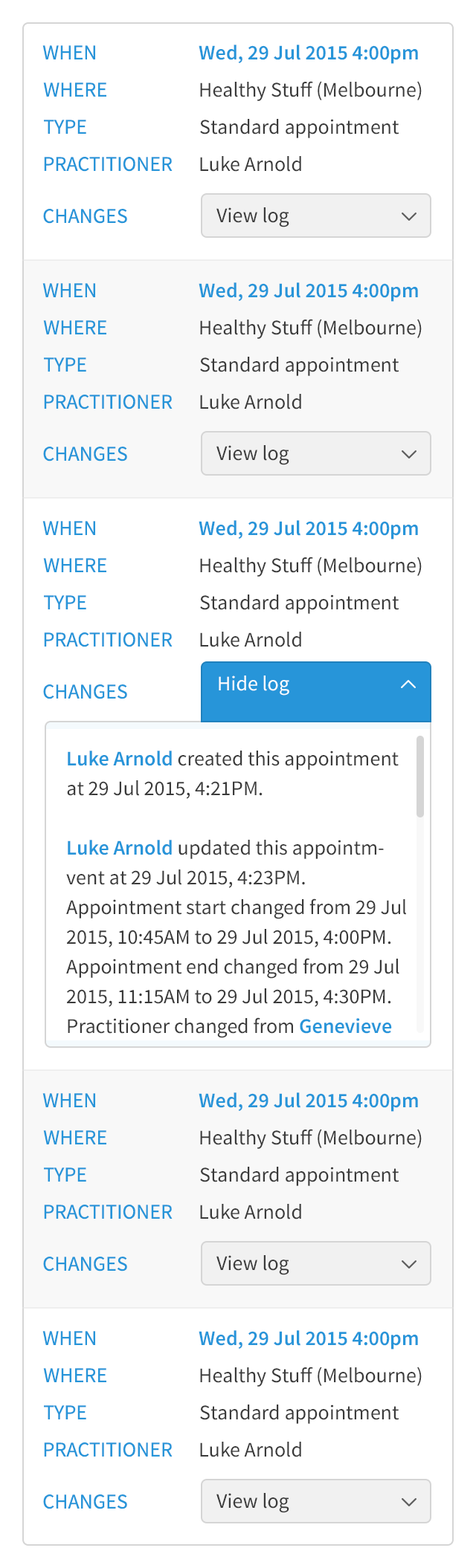
<style>
.page{position:relative;width:476px;height:1568px;background:#ffffff}
.page>*{position:absolute;margin:0}
.t1{font:20.8px "SourceSansPro-Regular";color:#2795d9;text-transform:uppercase}
.t2{font:20.8px "SourceSansPro-Semibold";color:#2795d9}
.t3{font:20.8px "SourceSansPro-Regular";color:#3a3a3a}
.t4{font:20.8px "SourceSansPro-Regular";color:#ffffff}
.t5{font:20.8px/29.7px "SourceSansPro-Regular";color:#3a3a3a}
.t6{font:20.8px/29.7px "SourceSansPro-Semibold";color:#2795d9}
</style>
<div class="page">
<p class="t1" style="left:42px;top:45px;width:53px;height:14px">When</p>
<p class="t2" style="left:198px;top:45px;width:220px;height:19px">Wed, 29 Jul 2015 4:00pm</p>
<p class="t1" style="left:43px;top:82px;width:63px;height:15px">Where</p>
<p class="t3" style="left:200px;top:81px;width:221px;height:20px">Healthy Stuff (Melbourne)</p>
<p class="t1" style="left:44px;top:120px;width:42px;height:14px">Type</p>
<p class="t3" style="left:200px;top:119px;width:198px;height:19px">Standard appointment</p>
<p class="t1" style="left:44px;top:157px;width:128px;height:15px">Practitioner</p>
<p class="t3" style="left:200px;top:156px;width:101px;height:16px">Luke Arnold</p>
<p class="t1" style="left:43px;top:209px;width:84px;height:15px">Changes</p>
<p class="t3" style="left:216px;top:207px;width:73px;height:20px">View log</p>
<p class="t1" style="left:42px;top:283px;width:53px;height:14px">When</p>
<p class="t2" style="left:198px;top:282px;width:220px;height:20px">Wed, 29 Jul 2015 4:00pm</p>
<p class="t1" style="left:43px;top:320px;width:63px;height:14px">Where</p>
<p class="t3" style="left:200px;top:319px;width:221px;height:20px">Healthy Stuff (Melbourne)</p>
<p class="t1" style="left:44px;top:357px;width:42px;height:15px">Type</p>
<p class="t3" style="left:200px;top:357px;width:198px;height:19px">Standard appointment</p>
<p class="t1" style="left:44px;top:395px;width:128px;height:14px">Practitioner</p>
<p class="t3" style="left:200px;top:394px;width:101px;height:15px">Luke Arnold</p>
<p class="t1" style="left:43px;top:447px;width:84px;height:14px">Changes</p>
<p class="t3" style="left:216px;top:445px;width:73px;height:20px">View log</p>
<p class="t1" style="left:42px;top:521px;width:53px;height:14px">When</p>
<p class="t2" style="left:198px;top:520px;width:220px;height:20px">Wed, 29 Jul 2015 4:00pm</p>
<p class="t3" style="left:200px;top:557px;width:221px;height:20px">Healthy Stuff (Melbourne)</p>
<p class="t1" style="left:43px;top:558px;width:63px;height:14px">Where</p>
<p class="t1" style="left:44px;top:595px;width:42px;height:14px">Type</p>
<p class="t3" style="left:200px;top:595px;width:198px;height:19px">Standard appointment</p>
<p class="t1" style="left:44px;top:632px;width:128px;height:15px">Practitioner</p>
<p class="t3" style="left:200px;top:632px;width:101px;height:15px">Luke Arnold</p>
<p class="t4" style="left:218px;top:676px;width:71px;height:20px">Hide log</p>
<p class="t1" style="left:43px;top:684px;width:84px;height:15px">Changes</p>
<p class="t5" style="left:66px;top:751px;width:340px;height:347px"><span class="t6">Luke Arnold</span> created this appointment at 29 Jul 2015, 4:21PM.<br><br><span class="t6">Luke Arnold</span> updated this appointmvent at 29 Jul 2015, 4:23PM. <br>Appointment start changed from 29 Jul 2015, 10:45AM to 29 Jul 2015, 4:00PM. <br>Appointment end changed from 29 Jul 2015, 11:15AM to 29 Jul 2015, 4:30PM. <br>Practitioner changed from <span class="t6">Genevieve Mayer</span> to <span class="t6">Luke Arnold</span>. <br>Updated at changed from 29 Jul 2015, 4:21PM to 29 Jul 2015, 4:23PM.<br><br><span class="t6">Luke Arnold</span> updated this appointment at 29 Jul 2015, 4:26PM. <br>Patient arrived changed from No to Yes. <br>Updated at changed from 29 Jul 2015, 4:23PM to 29 Jul 2015, 4:26PM.</p>
<p class="t1" style="left:42px;top:1093px;width:53px;height:14px">When</p>
<p class="t2" style="left:198px;top:1092px;width:220px;height:20px">Wed, 29 Jul 2015 4:00pm</p>
<p class="t1" style="left:43px;top:1130px;width:63px;height:14px">Where</p>
<p class="t3" style="left:200px;top:1129px;width:221px;height:20px">Healthy Stuff (Melbourne)</p>
<p class="t1" style="left:44px;top:1167px;width:42px;height:15px">Type</p>
<p class="t3" style="left:200px;top:1167px;width:198px;height:19px">Standard appointment</p>
<p class="t1" style="left:44px;top:1205px;width:128px;height:14px">Practitioner</p>
<p class="t3" style="left:200px;top:1204px;width:101px;height:15px">Luke Arnold</p>
<p class="t1" style="left:43px;top:1257px;width:84px;height:14px">Changes</p>
<p class="t3" style="left:216px;top:1255px;width:73px;height:20px">View log</p>
<p class="t1" style="left:42px;top:1331px;width:53px;height:14px">When</p>
<p class="t2" style="left:198px;top:1330px;width:220px;height:20px">Wed, 29 Jul 2015 4:00pm</p>
<p class="t1" style="left:43px;top:1368px;width:63px;height:14px">Where</p>
<p class="t3" style="left:200px;top:1367px;width:221px;height:20px">Healthy Stuff (Melbourne)</p>
<p class="t1" style="left:44px;top:1405px;width:42px;height:14px">Type</p>
<p class="t3" style="left:200px;top:1405px;width:198px;height:19px">Standard appointment</p>
<p class="t1" style="left:44px;top:1442px;width:128px;height:15px">Practitioner</p>
<p class="t3" style="left:200px;top:1442px;width:101px;height:15px">Luke Arnold</p>
<p class="t3" style="left:216px;top:1493px;width:73px;height:20px">View log</p>
<p class="t1" style="left:43px;top:1494px;width:84px;height:15px">Changes</p>
</div>
